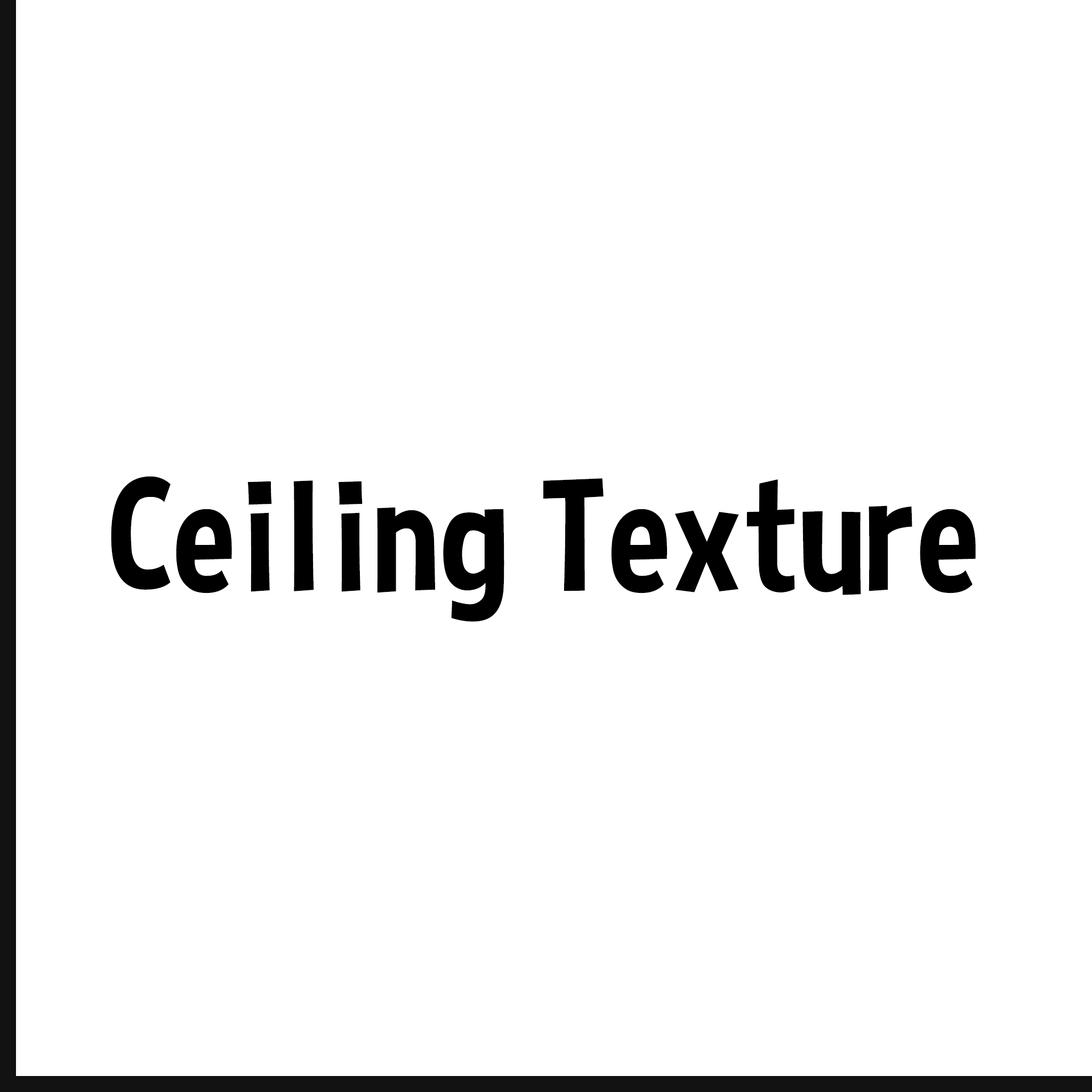
<style>
.page{position:relative;width:1092px;height:1092px;background:#ffffff}
.page>*{position:absolute;margin:0}
.t1{font:159.4px "CurseCasualRegular";color:#000000}
</style>
<div class="page">
<p class="t1" style="left:111px;top:476px;width:865px;height:146px">Ceiling Texture</p>
</div>
